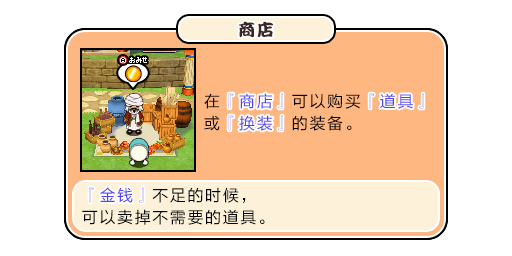
<style>
.page{position:relative;width:512px;height:256px;background:#ffffff}
.page>*{position:absolute;margin:0}
.t1{font:17px "DFPKanTingLiuW9";letter-spacing:0.1em;color:#3b2626}
.t2{font:16px/22px "FZLTHJW--GB1-0";letter-spacing:0.1em;color:#5444ed}
.t3{font:16px/22px "FZLTHJW--GB1-0";letter-spacing:0.1em;color:#000000}
.t4{font:16px "FZLTHJW--GB1-0";letter-spacing:0.1em;color:#5444ed}
</style>
<div class="page">
<p class="t1" style="left:239px;top:21px;width:34px;height:17px">商店</p>
<p class="t2" style="left:204px;top:93px;width:220px;height:38px"><span class="t3">在</span>『商店』<span class="t3">可以购买</span>『道具』<br><span class="t3">或</span>『换装』<span class="t3">的装备。</span></p>
<p class="t2" style="left:228px;top:93px;width:196px;height:38px">『商店』　　　　『道具』<br>　『换装』</p>
<p class="t3" style="left:82px;top:187px;width:183px;height:38px"><span class="t2">『金钱』</span>不足的时候，<br>可以卖掉不需要的道具。</p>
<p class="t4" style="left:89px;top:187px;width:55px;height:16px">『金钱』</p>
</div>
